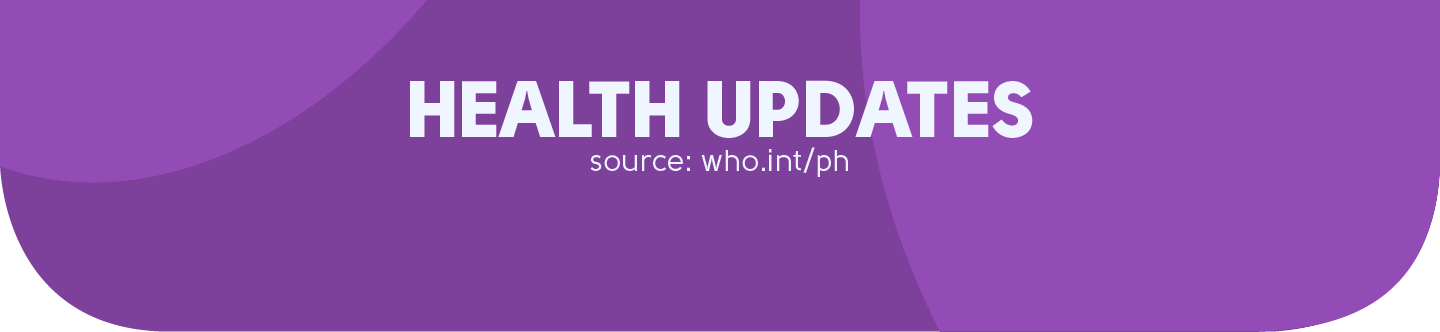
<style>
.page{position:relative;width:1440px;height:332px;background:#934cb6}
.page>*{position:absolute;margin:0}
.t1{font:80px "Solomon-Sans-Black";color:#f0f6ff}
.t2{font:30px "Solomon-Sans-Normal";color:#f0f6ff}
</style>
<div class="page">
<p class="t1" style="left:410px;top:80px;width:623px;height:58px">HEALTH UPDATES</p>
<p class="t2" style="left:590px;top:147px;width:258px;height:30px">source: who.int/ph</p>
</div>
